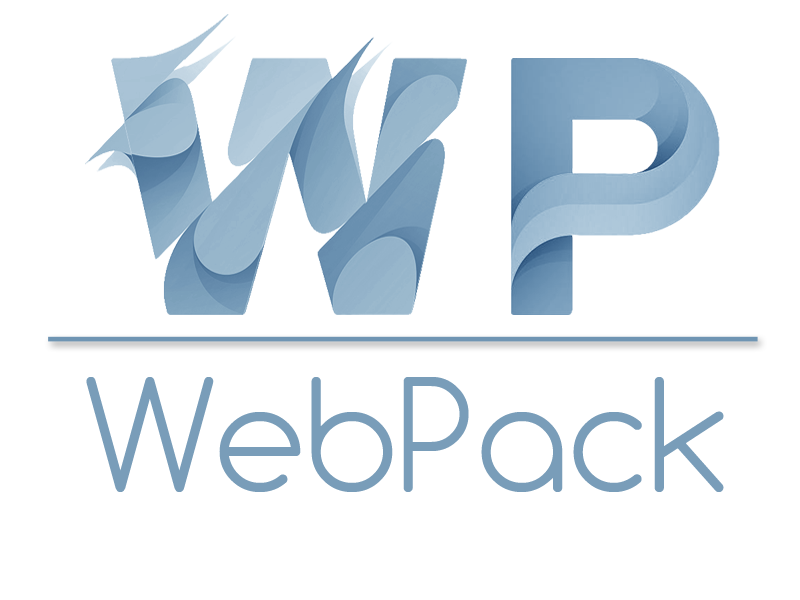
<style>
.page{position:relative;width:800px;height:600px;background:#ffffff}
.page>*{position:absolute;margin:0}
.t1{font:147.4px "Comfortaa-Light";color:#799db9}
</style>
<div class="page">
<p class="t1" style="left:86px;top:377px;width:638px;height:115px">WebPack</p>
</div>
